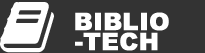
<style>
.page{position:relative;width:205px;height:53px;background:#333333}
.page>*{position:absolute;margin:0}
.t1{font:24px "Arial-Black";color:#ffffff;font-weight:bold}
</style>
<div class="page">
<p class="t1" style="left:75px;top:12px;width:94px;height:19px">BIBLIO</p>
<p class="t1" style="left:75px;top:32px;width:83px;height:19px">-TECH</p>
</div>
